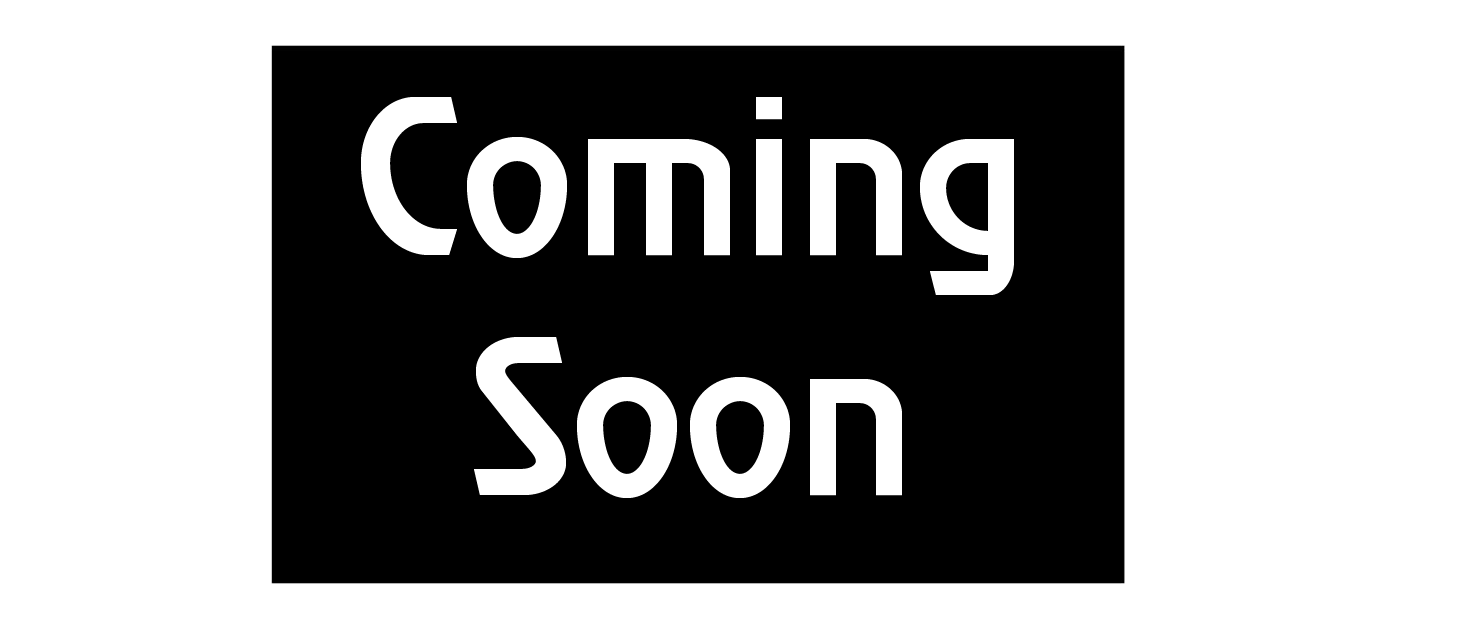
<style>
.page{position:relative;width:1471px;height:637px;background:#ffffff}
.page>*{position:absolute;margin:0}
.t1{font:200px "SHREE058";color:#ffffff}
</style>
<div class="page">
<p class="t1" style="left:361px;top:97px;width:653px;height:401px;text-align:center">Coming<br>Soon</p>
</div>
